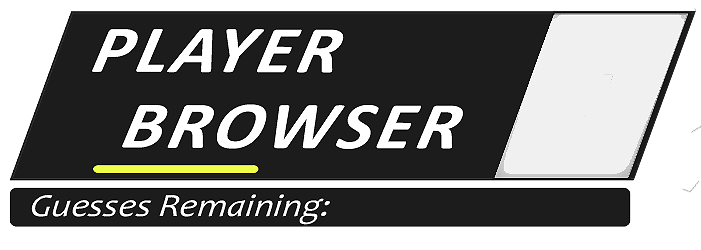
<style>
.page{position:relative;width:701px;height:250px;background:#1c1c1c}
.page>*{position:absolute;margin:0}
.t1{font:67.5px "Calibri-BoldItalic";letter-spacing:0.05em;color:#ffffff;font-style:italic;scale:1.11 1}
.t2{font:32.6px "Candara-Italic";letter-spacing:0.01em;color:#ffffff;font-style:italic;scale:1.13 1}
</style>
<div class="page">
<p class="t1" style="left:92px;top:29px;width:252px;height:44px">PLAYER</p>
<p class="t1" style="left:122px;top:104px;width:341px;height:45px">BROWSER</p>
<p class="t2" style="left:31px;top:194px;width:299px;height:31px">Guesses Remaining:</p>
</div>
